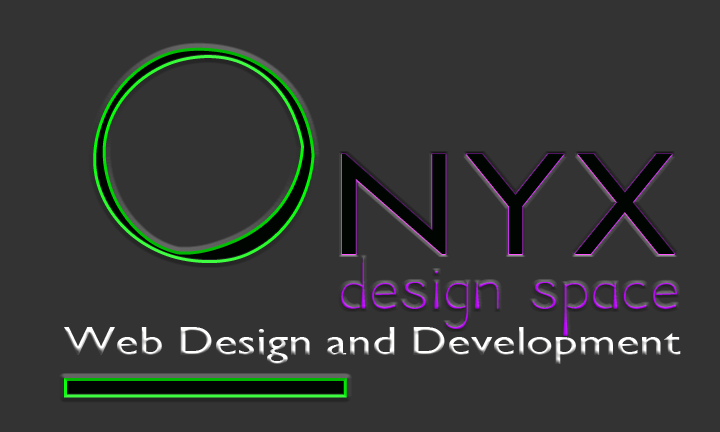
<style>
.page{position:relative;width:720px;height:432px;background:#333333}
.page>*{position:absolute;margin:0}
.t1{font:383.1px "Diligent";text-decoration:underline;scale:1.28 1}
.t2{font:138.9px "CenturyGothic";color:#000502;scale:1.31 1}
.t3{font:46.8px "Diligent";color:#b907f8;scale:1.15 1}
.t4{font:40.4px "GillSansMT";scale:1.22 1}
</style>
<div class="page">
<p class="t1" style="left:64px;top:47px;width:283px;height:351px">O</p>
<p class="t2" style="left:342px;top:154px;width:333px;height:100px">NYX</p>
<p class="t3" style="left:341px;top:257px;width:336px;height:79px">Design Space</p>
<p class="t4" style="left:64px;top:327px;width:617px;height:37px">Web Design and Development</p>
</div>
